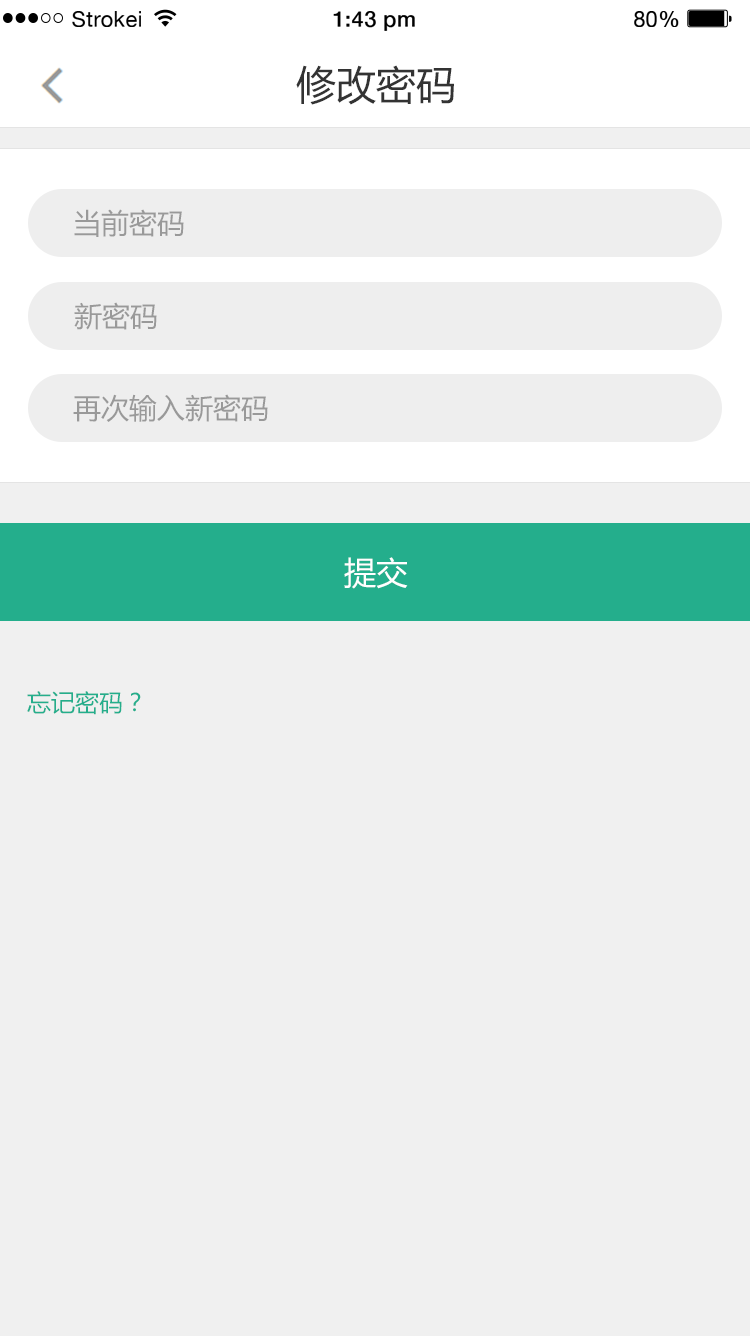
<style>
.page{position:relative;width:750px;height:1336px;background:#f0f0f0}
.page>*{position:absolute;margin:0}
.t1{font:21.8px "HelveticaNeue";letter-spacing:0.02em;color:#000000}
.t2{font:21.8px "HelveticaNeue-Medium";letter-spacing:0.02em;color:#000000}
.t3{font:40px "MicrosoftYaHei";color:#333333}
.t4{font:28px "MicrosoftYaHei";color:#999999}
.t5{font:32px "MicrosoftYaHei";color:#ffffff}
.t6{font:24px "MicrosoftYaHei";color:#24ae8c}
</style>
<div class="page">
<p class="t1" style="left:72px;top:11px;width:69px;height:16px">Strokei</p>
<p class="t2" style="left:333px;top:11px;width:82px;height:20px">1:43 pm</p>
<p class="t1" style="left:634px;top:11px;width:45px;height:16px">80<span class="t2">%</span></p>
<p class="t3" style="left:296px;top:65px;width:158px;height:40px">修改密码</p>
<p class="t4" style="left:74px;top:209px;width:110px;height:28px">当前密码</p>
<p class="t4" style="left:74px;top:302px;width:83px;height:28px">新密码</p>
<p class="t4" style="left:73px;top:394px;width:195px;height:28px">再次输入新密码</p>
<p class="t5" style="left:344px;top:557px;width:64px;height:32px">提交</p>
<p class="t6" style="left:27px;top:691px;width:114px;height:24px">忘记密码？</p>
</div>
